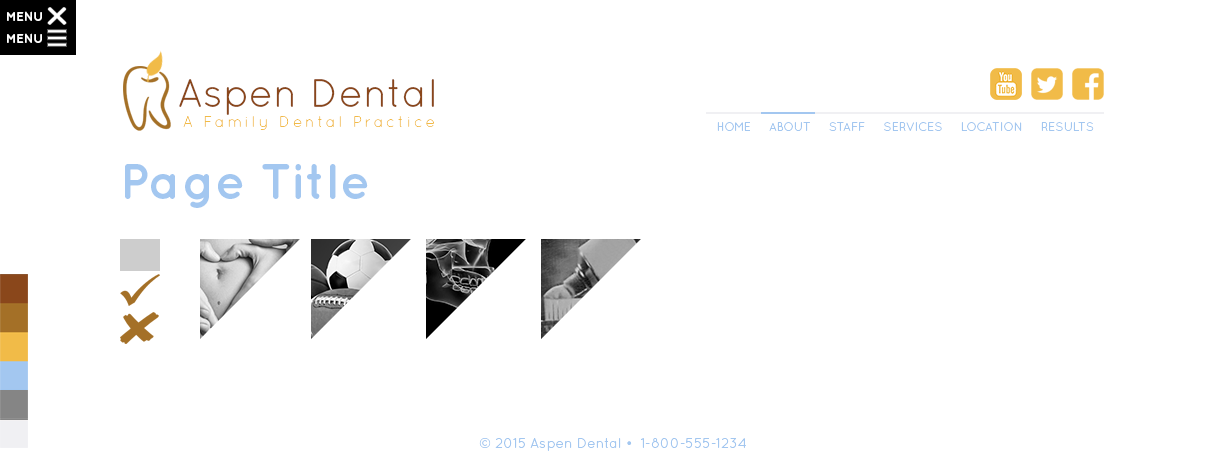
<style>
.page{position:relative;width:1224px;height:460px;background:#ffffff}
.page>*{position:absolute;margin:0}
.t1{font:13px "Quicksand-Bold";color:#ffffff}
.t2{font:40px "Quicksand-Regular";color:#8a471b}
.t3{font:15.1px "Quicksand-Light";letter-spacing:0.2em;color:#f1bb48}
.t4{font:12px "Quicksand-Regular";color:#a3c7f0}
.t5{font:12px "Quicksand-Bold";color:#a3c7f0}
.t6{font:14px "Quicksand-Regular";color:#a3c7f0}
</style>
<div class="page">
<p class="t1" style="left:7px;top:11px;width:35px;height:10px">MENU</p>
<p class="t1" style="left:7px;top:33px;width:35px;height:10px">MENU</p>
<p class="t2" style="left:179px;top:79px;width:255px;height:36px">Aspen Dental</p>
<p class="t3" style="left:183px;top:116px;width:251px;height:14px">A Family Dental Practice</p>
<p class="t4" style="left:717px;top:122px;width:377px;height:9px">HOME     ABOUT     STAFF     SERVICES     LOCATION     RESULTS</p>
<p class="t5" style="left:125px;top:164px;width:243px;height:44px">Page Title</p>
<p class="t6" style="left:479px;top:438px;width:267px;height:13px">© 2015 Aspen Dental •  1-800-555-1234</p>
</div>
